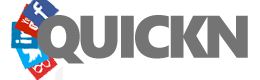
<style>
.page{position:relative;width:260px;height:80px;background:#ffffff}
.page>*{position:absolute;margin:0}
.t1{font:60px "SegoeUIBlack";letter-spacing:-0.075em;color:#747474}
</style>
<div class="page">
<p class="t1" style="left:37px;top:15px;width:211px;height:49px">QUICKN</p>
</div>
